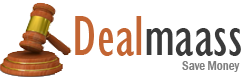
<style>
.page{position:relative;width:250px;height:80px;background:#ffffff}
.page>*{position:absolute;margin:0}
.t1{font:58px "GillSansMT-Condensed";color:#3a3a3a}
.t2{font:58px "GillSansMT-Condensed";color:#c36533}
.t3{font:13px "FranklinGothic-MediumCond";color:#808080}
</style>
<div class="page">
<p class="t1" style="left:75px;top:16px;width:166px;height:40px"><span class="t2">Deal</span>maass</p>
<p class="t3" style="left:182px;top:61px;width:58px;height:11px">Save Money</p>
</div>
